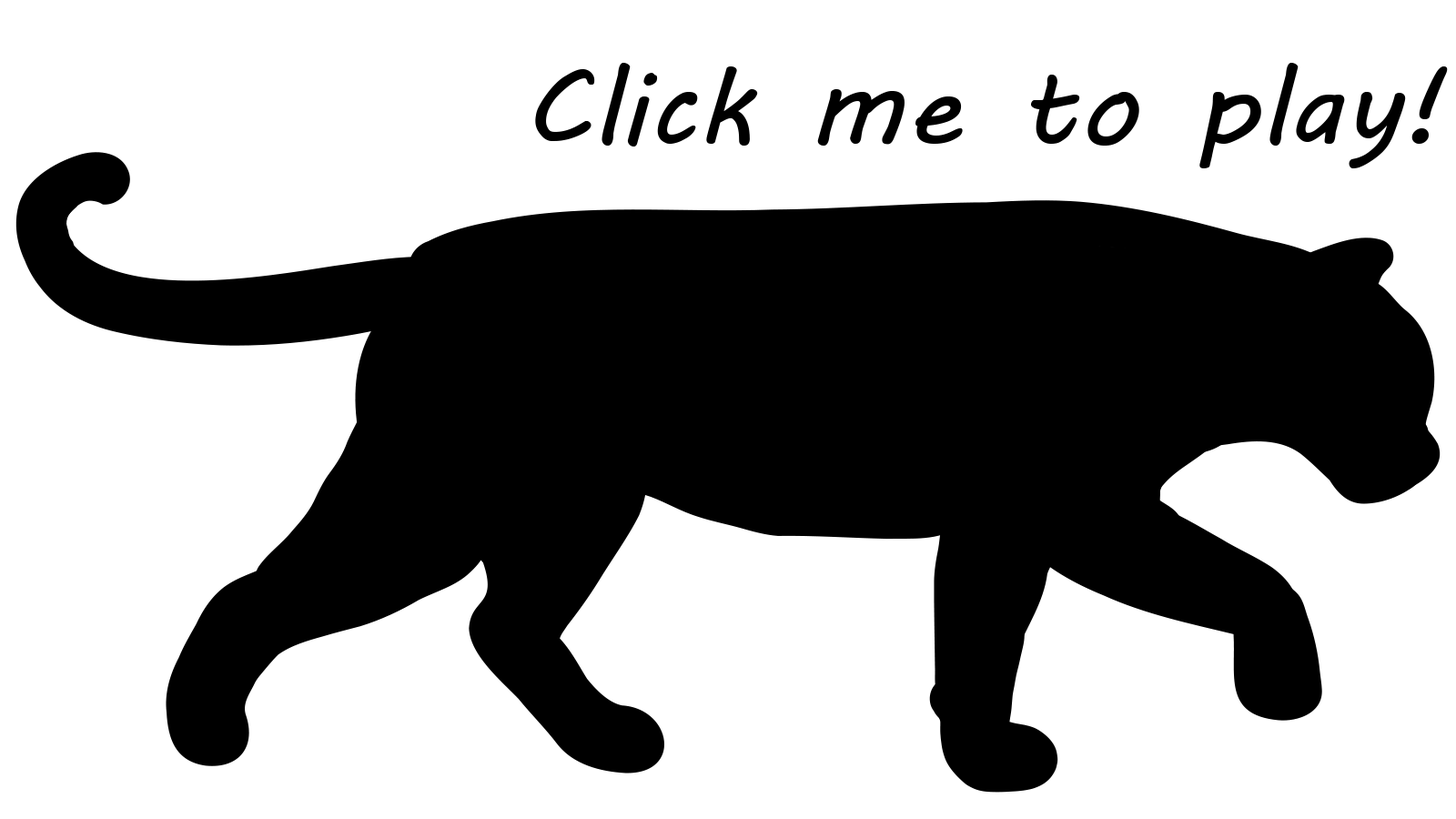
<style>
.page{position:relative;width:1456px;height:819px;background:#ffffff}
.page>*{position:absolute;margin:0}
.t1{font:108px "MVBoli";color:#000000;scale:1.06 1}
</style>
<div class="page">
<p class="t1" style="left:535px;top:63px;width:913px;height:105px">Click me to play!</p>
</div>
